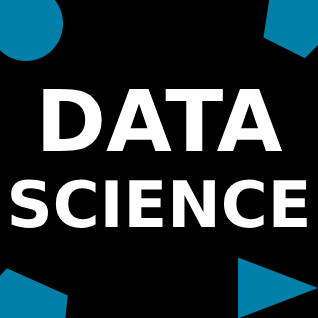
<style>
.page{position:relative;width:318px;height:318px;background:#000000}
.page>*{position:absolute;margin:0}
.t1{font:64px "DejaVuSans-Bold";color:#ffffff}
.t2{font:85px "DejaVuSans-Bold";color:#ffffff}
</style>
<div class="page">
<p class="t1" style="left:11px;top:89px;width:296px;height:139px;text-align:center"><span class="t2">DATA<br></span>SCIENCE</p>
</div>
